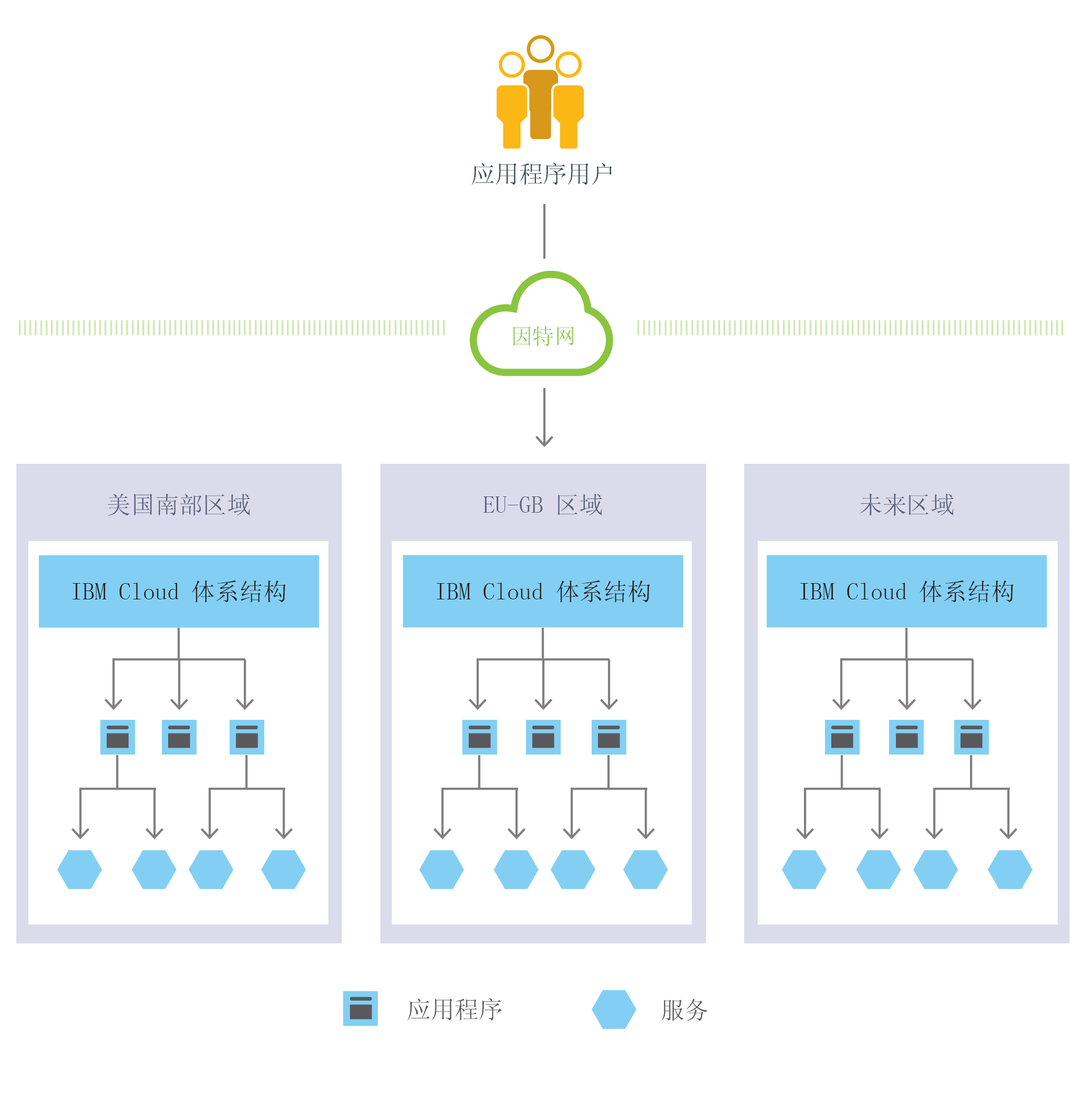
<style>
.page{position:relative;width:1084px;height:1100px;background:#ffffff}
.page>*{position:absolute;margin:0}
.t1{font:24.1px "SimSun";color:#3b4b54}
.t2{font:21.9px "SimSun";color:#8ac540}
.t3{font:24.1px "SimSun";color:#58607a}
.t4{font:24.1px "SimSun";color:#231f20}
.t5{font:24.1px "SimSun";color:#59595c}
</style>
<div class="page">
<p class="t1" style="left:471px;top:162px;width:141px;height:23px">应用程序用户</p>
<p class="t2" style="left:514px;top:325px;width:61px;height:21px">因特网</p>
<p class="t3" style="left:108px;top:493px;width:142px;height:23px">美国南部区域</p>
<p class="t3" style="left:484px;top:493px;width:118px;height:23px">EU-GB 区域</p>
<p class="t3" style="left:860px;top:493px;width:94px;height:23px">未来区域</p>
<p class="t4" style="left:73px;top:580px;width:213px;height:22px">IBM Cloud 体系结构</p>
<p class="t4" style="left:437px;top:580px;width:213px;height:22px">IBM Cloud 体系结构</p>
<p class="t4" style="left:801px;top:580px;width:213px;height:22px">IBM Cloud 体系结构</p>
<p class="t5" style="left:407px;top:998px;width:95px;height:22px">应用程序</p>
<p class="t5" style="left:662px;top:998px;width:46px;height:23px">服务</p>
</div>
